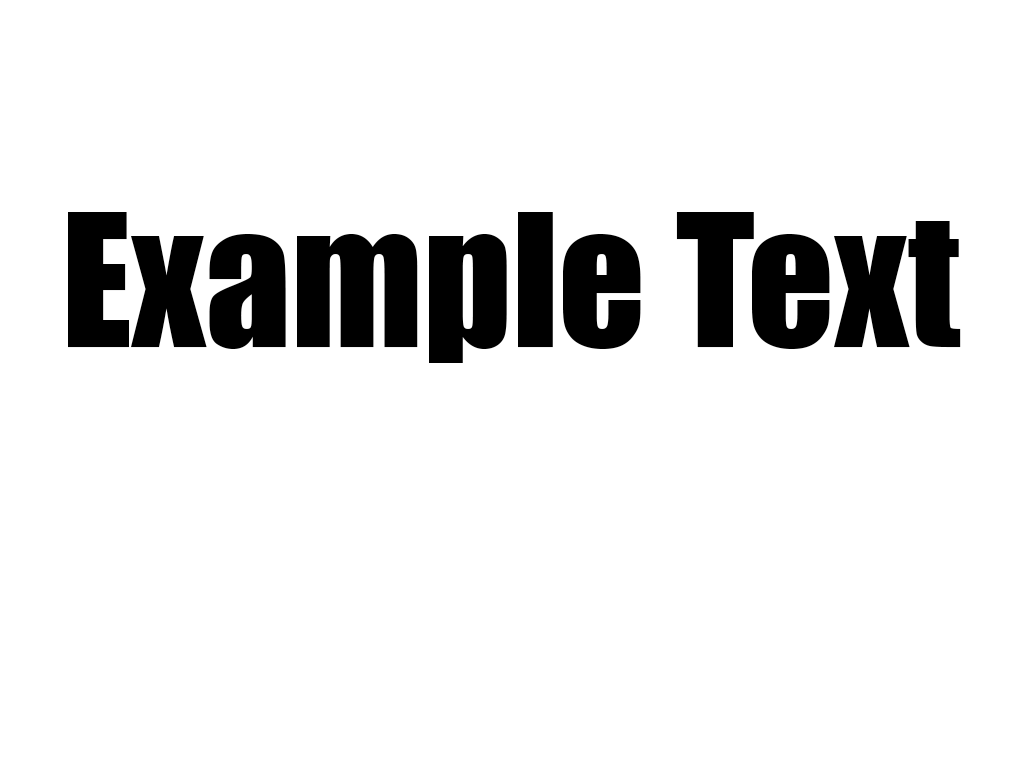
<style>
.page{position:relative;width:1024px;height:768px;background:#ffffff}
.page>*{position:absolute;margin:0}
.t1{font:170.7px "Impact";color:#000000}
</style>
<div class="page">
<p class="t1" style="left:68px;top:212px;width:893px;height:151px">Example Text</p>
</div>
